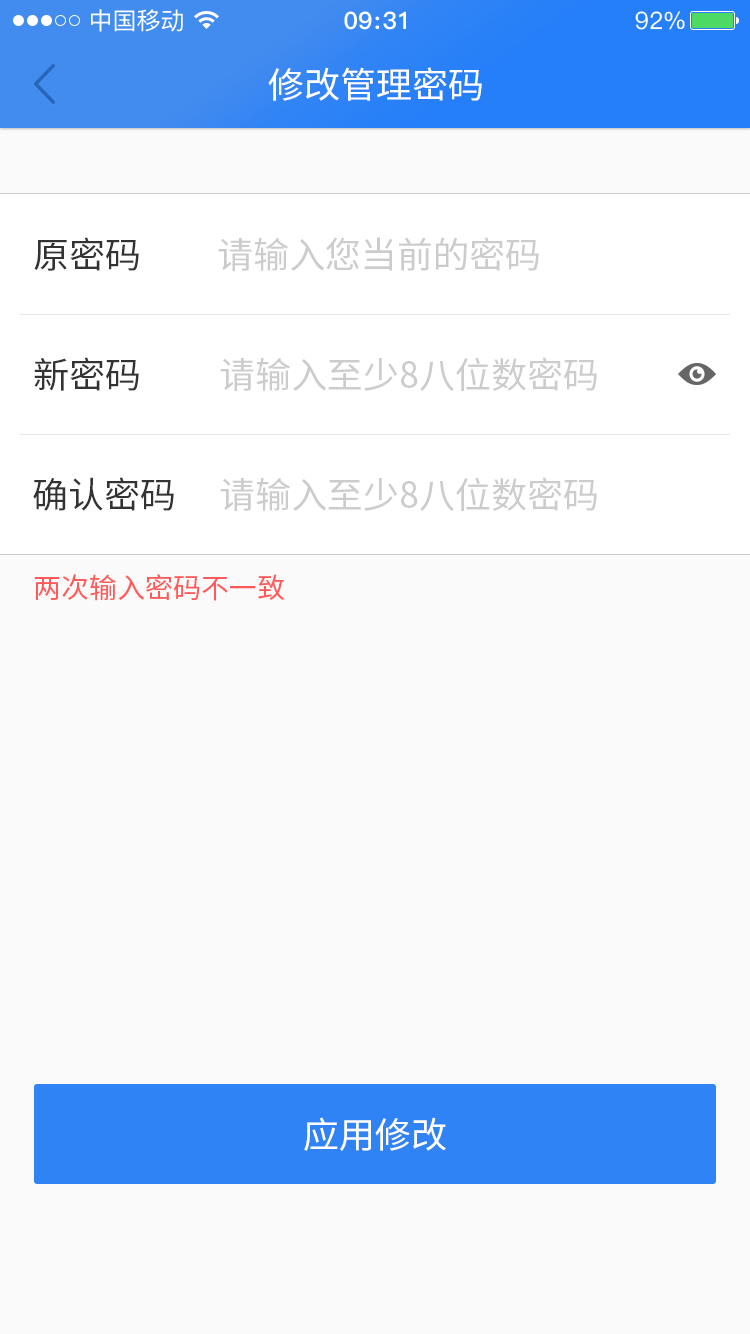
<style>
.page{position:relative;width:750px;height:1334px;background:#fafafa}
.page>*{position:absolute;margin:0}
.t1{font:36px "SourceHanSansCN-Regular";color:#ffffff}
.t2{font:36px "SourceHanSansCN-Regular";color:#333333}
.t3{font:36px "SourceHanSansCN-Regular";color:#cccccc}
.t4{font:28px "SourceHanSansCN-Regular";color:#ff5959}
</style>
<div class="page">
<p class="t1" style="left:268px;top:67px;width:214px;height:34px">修改管理密码</p>
<p class="t2" style="left:34px;top:237px;width:105px;height:34px">原密码</p>
<p class="t3" style="left:218px;top:237px;width:321px;height:34px">请输入您当前的密码</p>
<p class="t2" style="left:34px;top:357px;width:105px;height:34px">新密码</p>
<p class="t3" style="left:220px;top:357px;width:377px;height:34px">请输入至少8八位数密码</p>
<p class="t2" style="left:33px;top:477px;width:141px;height:34px">确认密码</p>
<p class="t3" style="left:220px;top:477px;width:377px;height:34px">请输入至少8八位数密码</p>
<p class="t4" style="left:34px;top:574px;width:251px;height:27px">两次输入密码不一致</p>
<p class="t1" style="left:304px;top:1117px;width:142px;height:34px">应用修改</p>
</div>
